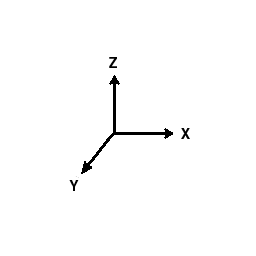
<style>
.page{position:relative;width:256px;height:256px;background:#ffffff}
.page>*{position:absolute;margin:0}
.t1{font:14px "Helvetica-Bold";color:#000000}
</style>
<div class="page">
<p class="t1" style="left:109px;top:57px;width:8px;height:11px">Z</p>
<p class="t1" style="left:181px;top:128px;width:9px;height:11px">X</p>
<p class="t1" style="left:69px;top:180px;width:10px;height:11px">Y</p>
</div>
